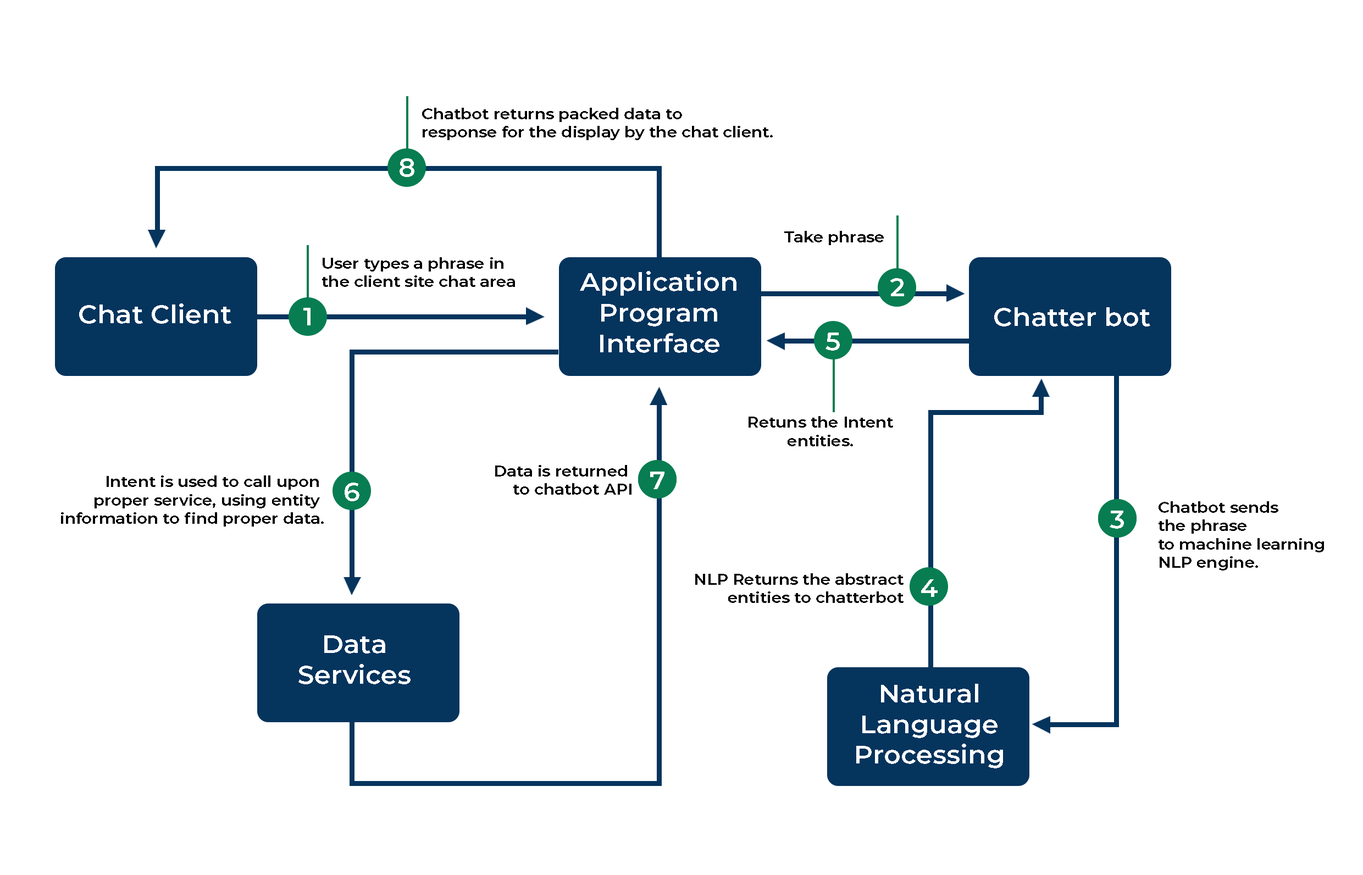
<style>
.page{position:relative;width:1363px;height:875px;background:#ffffff}
.page>*{position:absolute;margin:0}
.t1{font:15.4px "Montserrat-SemiBold";color:#000000;scale:1.05 1}
.t2{font:25.2px "Montserrat-SemiBold";color:#ffffff;scale:1.05 1}
.t3{font:25.5px "Montserrat-SemiBold";color:#ffffff;scale:1.05 1}
</style>
<div class="page">
<p class="t1" style="left:422px;top:108px;width:351px;height:32px">Chatbot returns packed data to <br>response for the display by the chat client.</p>
<p class="t2" style="left:400px;top:158px;width:14px;height:19px">8</p>
<p class="t1" style="left:784px;top:231px;width:100px;height:14px">Take phrase</p>
<p class="t1" style="left:322px;top:257px;width:193px;height:30px">User types a phrase in <br>the client site chat area</p>
<p class="t3" style="left:580px;top:271px;width:156px;height:82px;text-align:center">Application<br>Program<br>Interface</p>
<p class="t2" style="left:890px;top:278px;width:14px;height:18px">2</p>
<p class="t3" style="left:79px;top:303px;width:152px;height:21px">Chat Client</p>
<p class="t2" style="left:303px;top:308px;width:8px;height:17px">1</p>
<p class="t3" style="left:994px;top:307px;width:156px;height:19px">Chatter bot</p>
<p class="t2" style="left:825px;top:332px;width:15px;height:19px">5</p>
<p class="t1" style="left:749px;top:416px;width:144px;height:30px;text-align:center">Retuns the Intent<br>entities.</p>
<p class="t1" style="left:495px;top:465px;width:136px;height:30px;text-align:right">Data is returned <br>to chatbot API</p>
<p class="t2" style="left:650px;top:472px;width:14px;height:17px">7</p>
<p class="t2" style="left:653px;top:472px;width:7px;height:17px">1</p>
<p class="t1" style="left:61px;top:475px;width:263px;height:51px;text-align:right">Intent is used to call upon <br>proper service, using entity <br>information to find proper data.</p>
<p class="t2" style="left:345px;top:483px;width:14px;height:18px">6</p>
<p class="t1" style="left:1158px;top:501px;width:166px;height:69px">Chatbot sends <br>the phrase <br>to machine learning <br>NLP engine.</p>
<p class="t2" style="left:1110px;top:511px;width:14px;height:18px">3</p>
<p class="t2" style="left:1113px;top:511px;width:7px;height:17px">1</p>
<p class="t1" style="left:695px;top:573px;width:208px;height:30px;text-align:right">NLP Returns the abstract<br>entities to chatterbot</p>
<p class="t2" style="left:921px;top:579px;width:17px;height:18px">4</p>
<p class="t3" style="left:298px;top:635px;width:113px;height:49px;text-align:center">Data<br>Services</p>
<p class="t3" style="left:856px;top:684px;width:147px;height:84px;text-align:center">Natural<br>Language<br>Processing</p>
</div>
